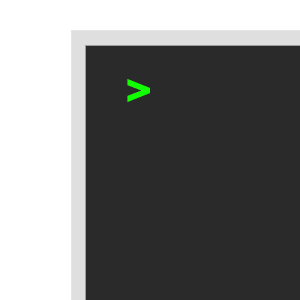
<style>
.page{position:relative;width:300px;height:300px;background:#2a2a2a}
.page>*{position:absolute;margin:0}
.t1{font:48px "Impact";color:#11ff00}
</style>
<div class="page">
<p class="t1" style="left:127px;top:79px;width:23px;height:23px">&gt;</p>
</div>
